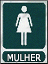
<style>
.page{position:relative;width:48px;height:64px}
.page>*{position:absolute;margin:0}
.t1{font:9.4px "Verdana";letter-spacing:0.02em;color:#fefefe;scale:0.83 1}
</style>
<div class="page">
<p class="t1" style="left:7px;top:54px;width:34px;height:8px">MULHER</p>
</div>
